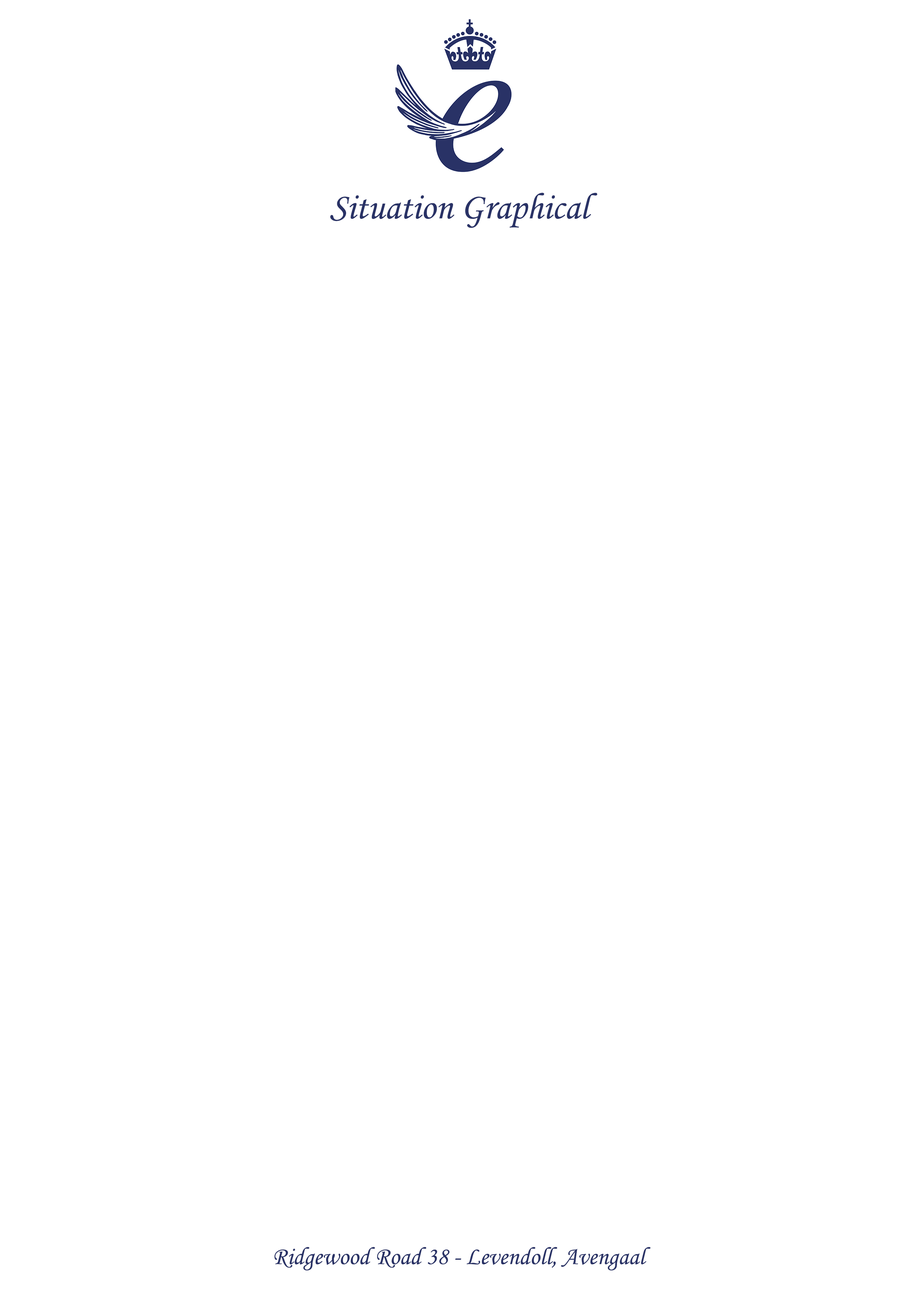
<style>
.page{position:relative;width:918px;height:1299px;background:#ffffff}
.page>*{position:absolute;margin:0}
.t1{font:37px "MonotypeCorsiva";color:#293266}
.t2{font:24.7px "MonotypeCorsiva";color:#293266}
</style>
<div class="page">
<p class="t1" style="left:330px;top:193px;width:268px;height:35px">Situation Graphical</p>
<p class="t2" style="left:274px;top:1247px;width:377px;height:23px">Ridgewood Road 38 - Levendoll, Avengaal</p>
</div>
